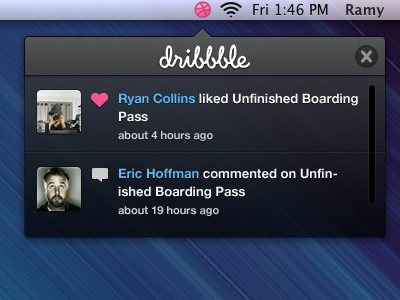
<style>
.page{position:relative;width:400px;height:300px}
.page>*{position:absolute;margin:0}
.t1{font:13px/18px "HelveticaNeue-Bold";color:#f2f2f2}
.t2{font:13px/18px "HelveticaNeue-Bold";color:#59baf0}
.t3{font:11px/18px "HelveticaNeue-Bold";color:#cdcdcd}
.t4{font:13px/18px "HelveticaNeue-Bold";color:#5abaf1}
</style>
<div class="page">
<p class="t1" style="left:118px;top:93px;width:240px;height:48px"><span class="t2">Ryan Collins </span>liked Unfinished Boarding Pass<br><span class="t3">about 4 hours ago</span></p>
<p class="t1" style="left:118px;top:168px;width:219px;height:48px"><span class="t4">Eric Hoffman</span> commented on Unfinished Boarding Pass<br><span class="t3">about 19 hours ago</span></p>
</div>
